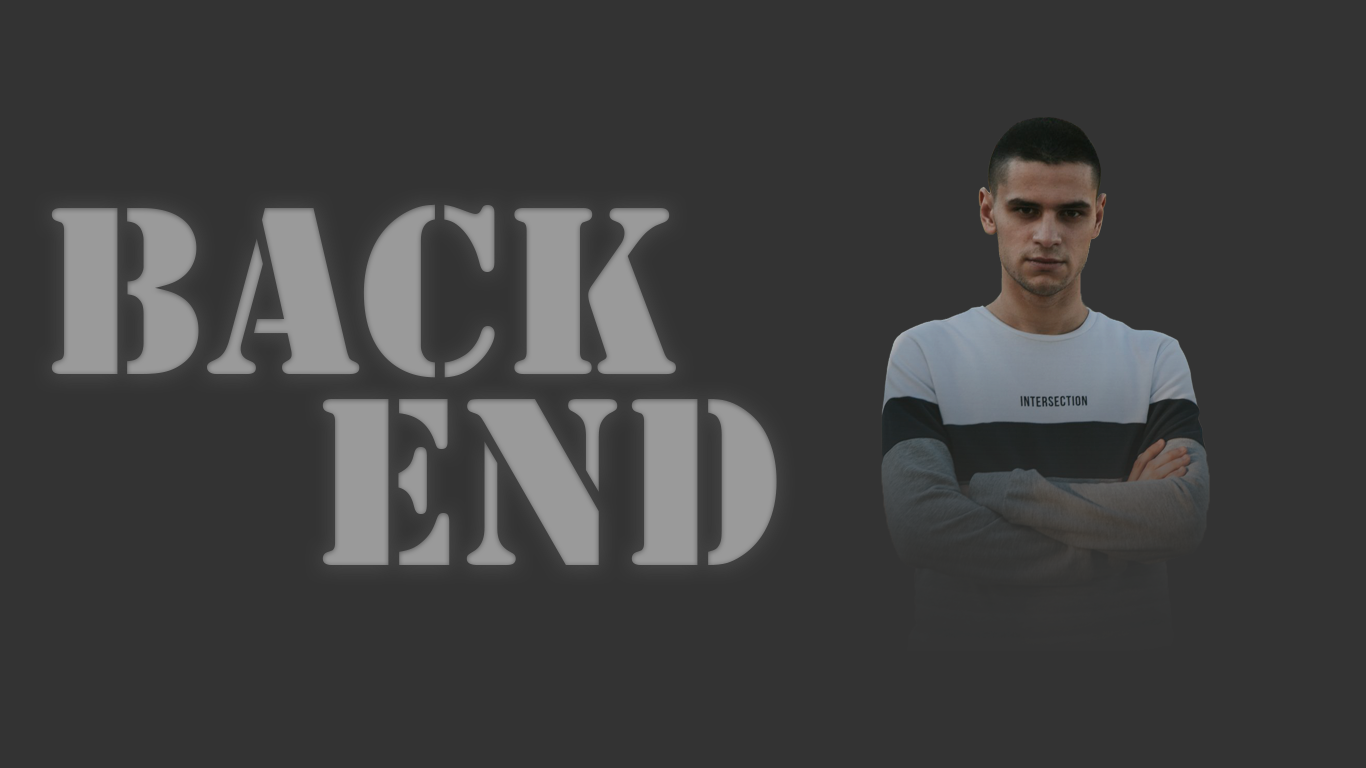
<style>
.page{position:relative;width:1366px;height:768px;background:#333333}
.page>*{position:absolute;margin:0}
.t1{font:249px/190.6px "Stencil";color:#9a9a9a}
</style>
<div class="page">
<p class="t1" style="left:51px;top:204px;width:726px;height:361px;text-align:center">Back<br>      end</p>
</div>
